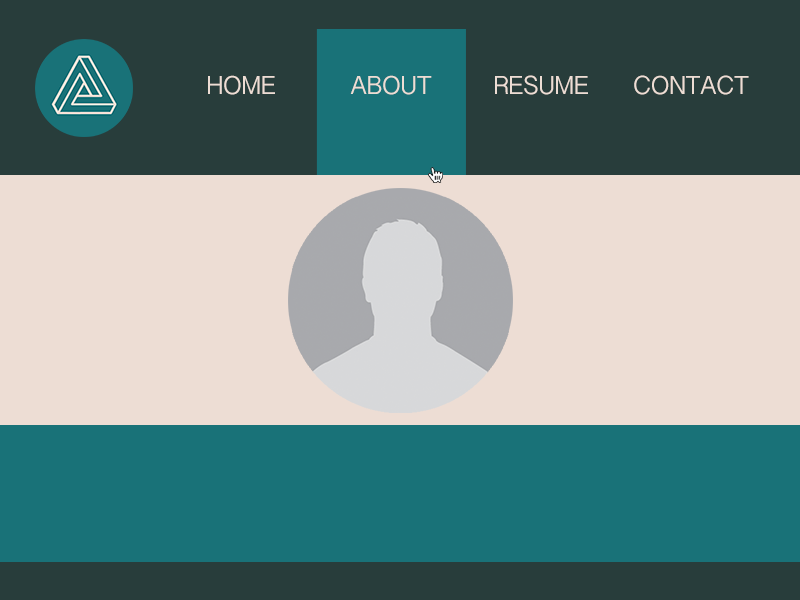
<style>
.page{position:relative;width:800px;height:600px;background:#edddd4}
.page>*{position:absolute;margin:0}
.t1{font:24px "KannadaSangamMN";color:#edddd4}
</style>
<div class="page">
<p class="t1" style="left:208px;top:75px;width:67px;height:20px">HOME</p>
<p class="t1" style="left:350px;top:75px;width:82px;height:20px">ABOUT</p>
<p class="t1" style="left:495px;top:75px;width:93px;height:20px">RESUME</p>
<p class="t1" style="left:634px;top:75px;width:115px;height:20px">CONTACT</p>
</div>
